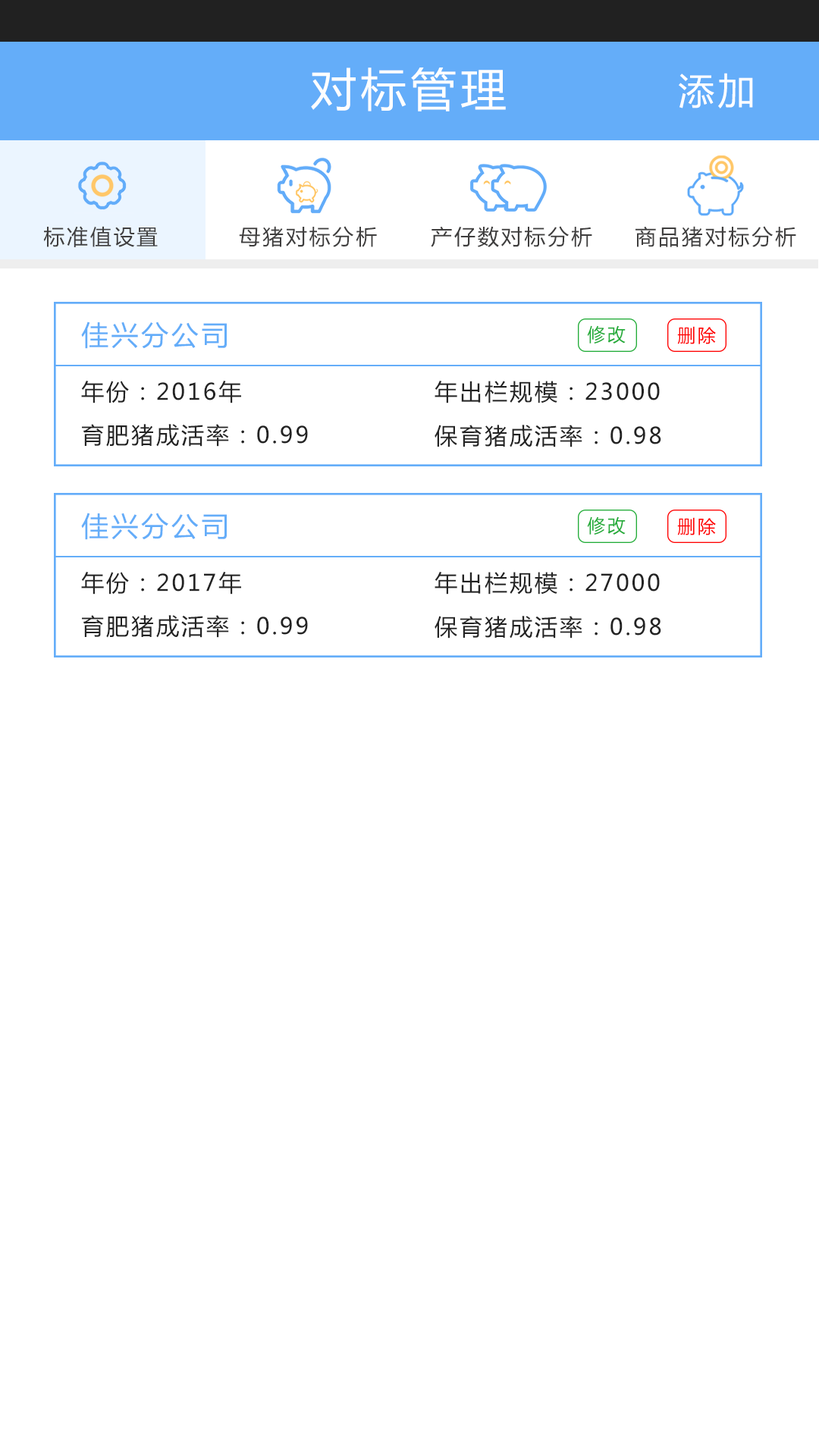
<style>
.page{position:relative;width:819px;height:1456px;background:#ffffff}
.page>*{position:absolute;margin:0}
.t1{font:45.5px "MicrosoftYaHei";letter-spacing:0.1em;color:#fefefe}
.t2{font:36.4px "MicrosoftYaHei";letter-spacing:0.1em;color:#ffffff}
.t3{font:21.2px "MicrosoftYaHei";letter-spacing:0.1em;color:#3f3e3e}
.t4{font:27.3px "MicrosoftYaHei";letter-spacing:0.1em;color:#64adf9}
.t5{font:18.2px "MicrosoftYaHei";letter-spacing:0.1em;color:#22ac38}
.t6{font:18.2px "MicrosoftYaHei";letter-spacing:0.1em;color:#ff0000}
.t7{font:22.7px "MicrosoftYaHei";letter-spacing:0.1em;color:#232323}
</style>
<div class="page">
<p class="t1" style="left:311px;top:67px;width:195px;height:44px">对标管理</p>
<p class="t2" style="left:679px;top:73px;width:74px;height:35px">添加</p>
<p class="t3" style="left:43px;top:226px;width:115px;height:21px">标准值设置</p>
<p class="t3" style="left:239px;top:226px;width:138px;height:21px">母猪对标分析</p>
<p class="t3" style="left:431px;top:226px;width:161px;height:21px">产仔数对标分析</p>
<p class="t3" style="left:635px;top:226px;width:161px;height:21px">商品猪对标分析</p>
<p class="t4" style="left:81px;top:322px;width:146px;height:27px">佳兴分公司</p>
<p class="t5" style="left:587px;top:325px;width:39px;height:19px">修改</p>
<p class="t6" style="left:677px;top:326px;width:39px;height:18px">删除</p>
<p class="t7" style="left:81px;top:381px;width:160px;height:22px">年份：2016年</p>
<p class="t7" style="left:435px;top:381px;width:225px;height:22px">年出栏规模：23000</p>
<p class="t7" style="left:82px;top:424px;width:226px;height:23px">育肥猪成活率：0.99</p>
<p class="t7" style="left:435px;top:425px;width:226px;height:22px">保育猪成活率：0.98</p>
<p class="t4" style="left:81px;top:513px;width:146px;height:27px">佳兴分公司</p>
<p class="t5" style="left:587px;top:516px;width:39px;height:19px">修改</p>
<p class="t6" style="left:677px;top:517px;width:39px;height:18px">删除</p>
<p class="t7" style="left:81px;top:572px;width:160px;height:23px">年份：2017年</p>
<p class="t7" style="left:435px;top:572px;width:225px;height:23px">年出栏规模：27000</p>
<p class="t7" style="left:82px;top:615px;width:226px;height:23px">育肥猪成活率：0.99</p>
<p class="t7" style="left:435px;top:616px;width:226px;height:23px">保育猪成活率：0.98</p>
</div>
